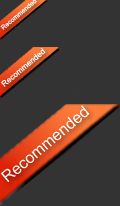
<style>
.page{position:relative;width:120px;height:206px;background:#333333}
.page>*{position:absolute;margin:0}
.t1{font:8px "ArialMT";color:#ffffff}
.t2{font:16px "ArialMT";color:#ffffff}
</style>
<div class="page">
<p class="t1" style="left:0px;top:47px;width:48px;height:42px;rotate:-40deg">Recommended</p>
<p class="t2" style="left:0px;top:103px;width:94px;height:84px;rotate:-40deg">Recommended</p>
</div>
